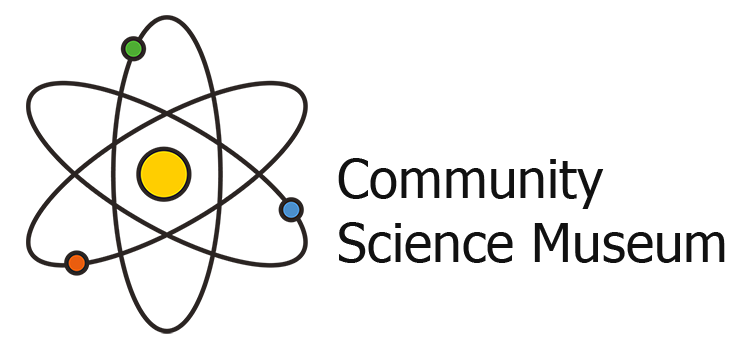
<style>
.page{position:relative;width:754px;height:351px;background:#ffffff}
.page>*{position:absolute;margin:0}
.t1{font:53.3px "Tahoma";color:#111111}
</style>
<div class="page">
<p class="t1" style="left:338px;top:158px;width:387px;height:105px">Community<br>Science Museum</p>
</div>
